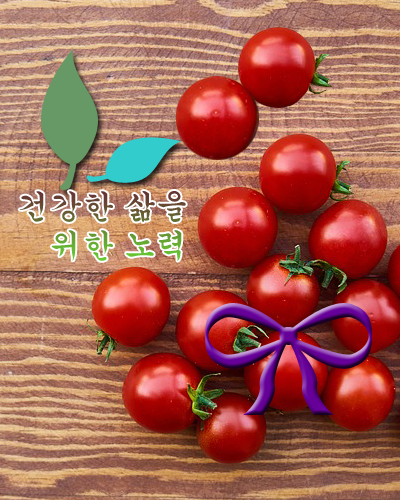
<style>
.page{position:relative;width:400px;height:500px}
.page>*{position:absolute;margin:0}
.t1{font:32px "Gungsuh"}
</style>
<div class="page">
<p class="t1" style="left:19px;top:191px;width:167px;height:70px;text-align:right">건강한 삶을<br>위한 노력</p>
</div>
